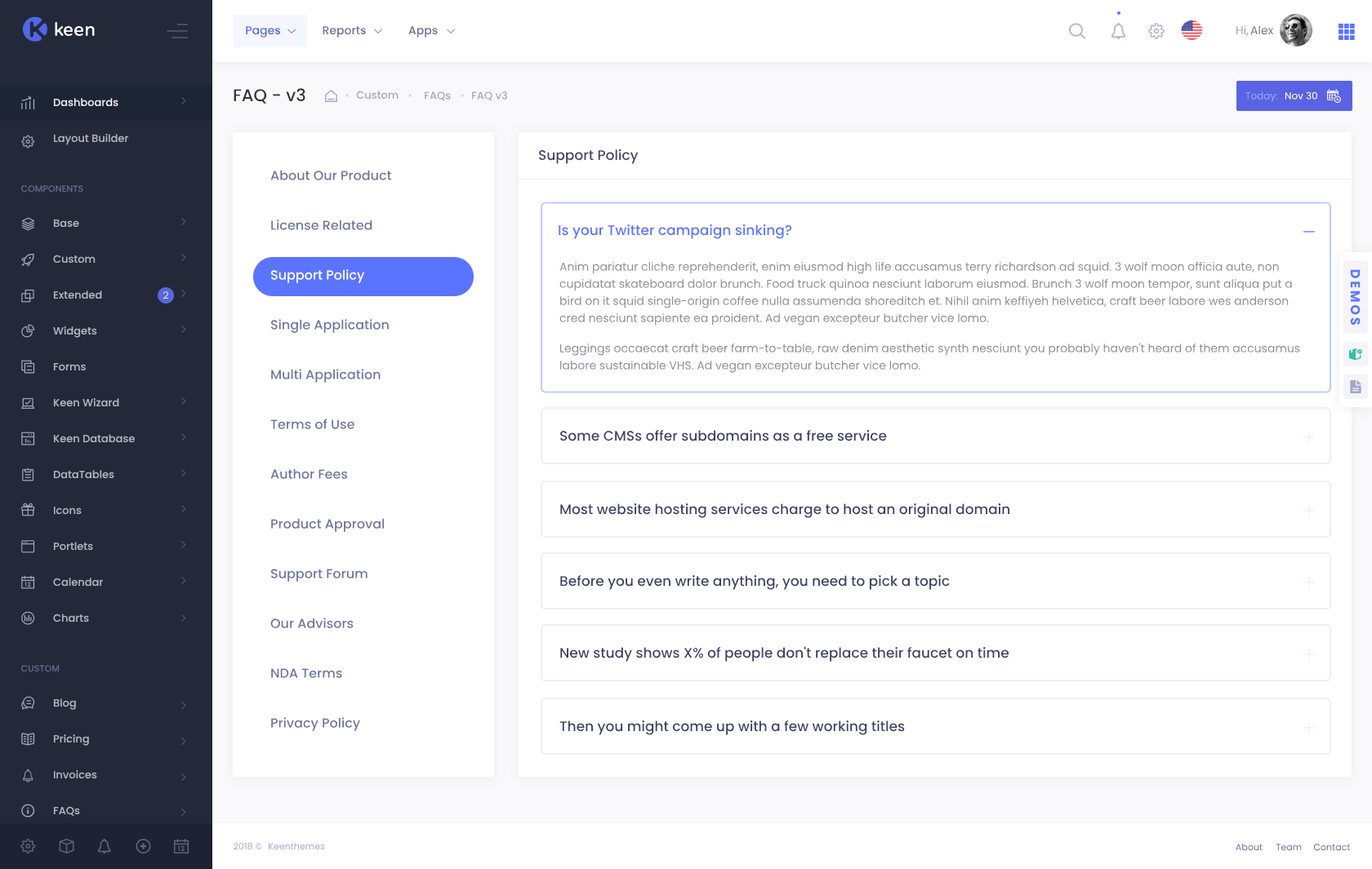
<style>
.page{position:relative;width:1372px;height:869px;background:#ffffff}
.page>*{position:absolute;margin:0}
.t1{font:11.4px "Poppins-Medium";color:#5067e9}
.t2{font:11.4px "Poppins-Medium";color:#6b7195}
.t3{font:11.4px "Poppins-Regular";color:#9ea4a9}
.t4{font:11.4px "Poppins-Regular";color:#868e96}
.t5{font:11.4px "Poppins-Regular";color:#757485}
.t6{font:17.1px "Poppins-Medium";color:#333333}
.t7{font:10.6px "Poppins-Medium";color:#ededf2}
.t8{font:11.4px "Poppins-Regular";color:#dadae8}
.t9{font:10.6px "Poppins-Medium";color:#a0a8c5}
.t10{font:9.8px "Poppins-Regular";color:#a2a8f0}
.t11{font:9.8px "Poppins-Regular";color:#ffffff}
.t12{font:10.6px "Poppins-Medium";color:#b5b5c1}
.t13{font:13.9px "Poppins-Medium";color:#3c4368}
.t14{font:13.1px/49.8px "Poppins-Medium";color:#6d74a4}
.t15{font:13.1px/49.8px "Poppins-Medium";color:#ffffff}
.t16{font:9px "Poppins-Medium";color:#606b8c;text-transform:uppercase}
.t17{font:13.9px "Poppins-Medium";color:#5b74ff}
.t18{font:11.4px/16.3px "Poppins-Regular";color:#8d8c9c}
.t19{font:9.8px "Poppins-Light";color:#ffffff}
.t20{font:9.1px "Poppins-Regular";color:#a1a8c3}
.t21{font:9.1px "Poppins-Regular";color:#646c9a}
</style>
<div class="page">
<p class="t1" style="left:246px;top:26px;width:35px;height:12px">Pages</p>
<p class="t2" style="left:322px;top:26px;width:44px;height:12px">Reports</p>
<p class="t2" style="left:408px;top:26px;width:30px;height:12px">Apps</p>
<p class="t3" style="left:1236px;top:25px;width:12px;height:11px">Hi<span class="t4">,</span></p>
<p class="t5" style="left:1250px;top:25px;width:23px;height:10px">Alex</p>
<p class="t6" style="left:233px;top:88px;width:72px;height:16px">FAQ - v3</p>
<p class="t7" style="left:53px;top:98px;width:65px;height:9px">Dashboards</p>
<p class="t8" style="left:345px;top:94px;width:4px;height:3px">•</p>
<p class="t9" style="left:356px;top:91px;width:42px;height:9px">Custom</p>
<p class="t8" style="left:408px;top:94px;width:4px;height:3px">•</p>
<p class="t9" style="left:425px;top:91px;width:26px;height:10px">FAQs</p>
<p class="t8" style="left:460px;top:94px;width:4px;height:3px">•</p>
<p class="t9" style="left:472px;top:91px;width:35px;height:10px">FAQ v3</p>
<p class="t10" style="left:1245px;top:91px;width:33px;height:11px">Today:</p>
<p class="t11" style="left:1284px;top:91px;width:33px;height:9px">Nov 30</p>
<p class="t12" style="left:53px;top:133px;width:76px;height:12px">Layout Builder</p>
<p class="t13" style="left:538px;top:149px;width:100px;height:15px">Support Policy</p>
<p class="t14" style="left:270px;top:170px;width:122px;height:561px">About Our Product<br>License Related<br><span class="t15">Support Policy</span><br>Single Application<br>Multi Application<br>Terms of Use<br>Author Fees<br>Product Approval<br>Support Forum<br>Our Advisors<br>NDA Terms<br>Privacy Policy</p>
<p class="t16" style="left:21px;top:185px;width:62px;height:8px">Components</p>
<p class="t12" style="left:53px;top:219px;width:26px;height:9px">Base</p>
<p class="t17" style="left:558px;top:224px;width:234px;height:15px">Is your Twitter campaign sinking?</p>
<p class="t12" style="left:53px;top:255px;width:43px;height:9px">Custom</p>
<p class="t18" style="left:559px;top:261px;width:741px;height:112px">Anim pariatur cliche reprehenderit, enim eiusmod high life accusamus terry richardson ad squid. 3 wolf moon officia aute, non cupidatat skateboard dolor brunch. Food truck quinoa nesciunt laborum eiusmod. Brunch 3 wolf moon tempor, sunt aliqua put a bird on it squid single-origin coffee nulla assumenda shoreditch et. Nihil anim keffiyeh helvetica, craft beer labore wes anderson cred nesciunt sapiente ea proident. Ad vegan excepteur butcher vice lomo.<br><br>Leggings occaecat craft beer farm-to-table, raw denim aesthetic synth nesciunt you probably haven't heard of them accusamus labore sustainable VHS. Ad vegan excepteur butcher vice lomo.</p>
<p class="t12" style="left:53px;top:291px;width:49px;height:9px">Extended</p>
<p class="t19" style="left:163px;top:291px;width:5px;height:8px">2</p>
<p class="t12" style="left:53px;top:326px;width:44px;height:12px">Widgets</p>
<p class="t12" style="left:53px;top:362px;width:33px;height:9px">Forms</p>
<p class="t12" style="left:53px;top:398px;width:66px;height:9px">Keen Wizard</p>
<p class="t12" style="left:53px;top:434px;width:82px;height:9px">Keen Database</p>
<p class="t13" style="left:559px;top:429px;width:328px;height:13px">Some CMSs offer subdomains as a free service</p>
<p class="t12" style="left:53px;top:470px;width:61px;height:9px">DataTables</p>
<p class="t12" style="left:53px;top:506px;width:29px;height:9px">Icons</p>
<p class="t13" style="left:560px;top:503px;width:450px;height:15px">Most website hosting services charge to host an original domain</p>
<p class="t12" style="left:53px;top:542px;width:40px;height:9px">Portlets</p>
<p class="t12" style="left:53px;top:578px;width:50px;height:9px">Calendar</p>
<p class="t13" style="left:560px;top:575px;width:389px;height:15px">Before you even write anything, you need to pick a topic</p>
<p class="t12" style="left:53px;top:614px;width:36px;height:9px">Charts</p>
<p class="t13" style="left:560px;top:647px;width:449px;height:15px">New study shows X% of people don't replace their faucet on time</p>
<p class="t16" style="left:21px;top:665px;width:39px;height:8px">Custom</p>
<p class="t12" style="left:53px;top:699px;width:23px;height:11px">Blog</p>
<p class="t13" style="left:559px;top:720px;width:346px;height:16px">Then you might come up with a few working titles</p>
<p class="t12" style="left:53px;top:734px;width:36px;height:12px">Pricing</p>
<p class="t12" style="left:53px;top:770px;width:44px;height:10px">Invoices</p>
<p class="t12" style="left:53px;top:807px;width:27px;height:9px">FAQs</p>
<p class="t20" style="left:233px;top:842px;width:29px;height:9px">2018 ©</p>
<p class="t20" style="left:269px;top:842px;width:56px;height:9px">Keenthemes</p>
<p class="t21" style="left:1235px;top:843px;width:27px;height:8px">About</p>
<p class="t21" style="left:1275px;top:844px;width:26px;height:7px">Team</p>
<p class="t21" style="left:1313px;top:844px;width:37px;height:7px">Contact</p>
</div>
